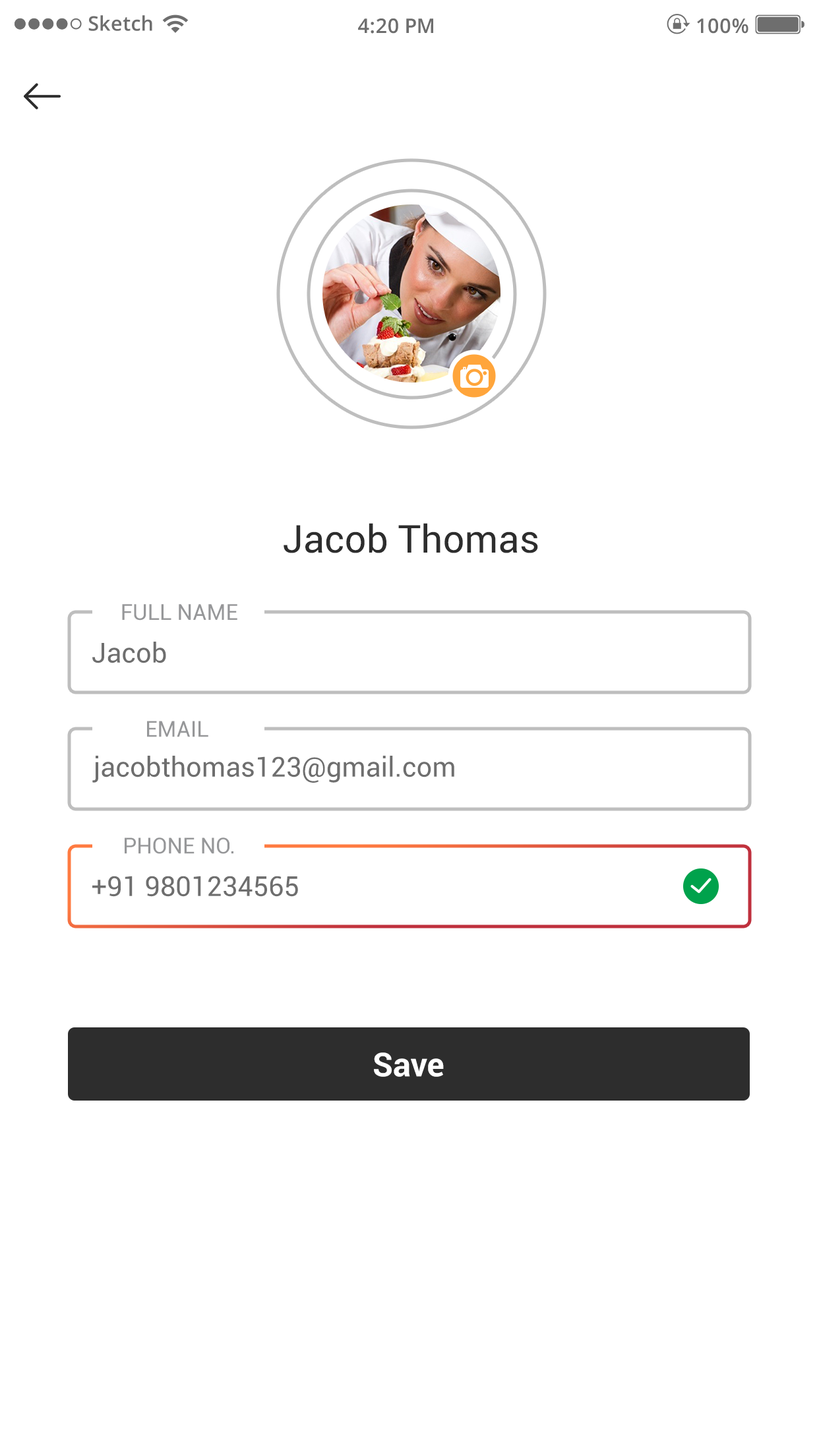
<style>
.page{position:relative;width:819px;height:1456px;background:#ffffff}
.page>*{position:absolute;margin:0}
.t1{font:20.1px "OpenSans-Semibold";color:#6e6e6e}
.t2{font:38.5px "Roboto-Regular";color:#2d2d2d}
.t3{font:22px "Roboto-Regular";color:#969799}
.t4{font:27.5px "Roboto-Regular";color:#6e6e6e}
.t5{font:33px "Roboto-Bold";color:#ffffff}
</style>
<div class="page">
<p class="t1" style="left:88px;top:15px;width:64px;height:16px">Sketch</p>
<p class="t1" style="left:358px;top:18px;width:75px;height:16px">4:20 PM</p>
<p class="t1" style="left:697px;top:18px;width:51px;height:16px">100%</p>
<p class="t2" style="left:284px;top:523px;width:254px;height:30px">Jacob Thomas</p>
<p class="t3" style="left:122px;top:604px;width:115px;height:17px">FULL NAME</p>
<p class="t4" style="left:92px;top:642px;width:74px;height:21px">Jacob</p>
<p class="t3" style="left:147px;top:721px;width:61px;height:16px">EMAIL</p>
<p class="t4" style="left:92px;top:756px;width:362px;height:27px">jacobthomas123@gmail.com</p>
<p class="t3" style="left:125px;top:837px;width:108px;height:17px">PHONE NO.</p>
<p class="t4" style="left:92px;top:876px;width:206px;height:21px">+91 9801234565</p>
<p class="t5" style="left:374px;top:1052px;width:70px;height:25px">Save</p>
</div>
